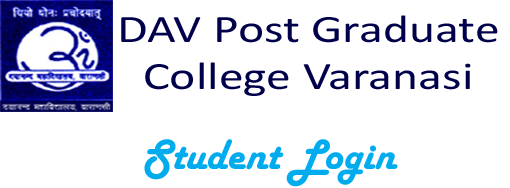
<style>
.page{position:relative;width:510px;height:188px;background:#ffffff}
.page>*{position:absolute;margin:0}
.t1{font:39.2px "Calibri";color:#00004b;scale:1.27 1}
.t2{font:44.2px "HarlowSolid";color:#00aced}
</style>
<div class="page">
<p class="t1" style="left:121px;top:15px;width:377px;height:81px;text-align:center">DAV Post Graduate <br>College Varanasi</p>
<p class="t2" style="left:144px;top:139px;width:254px;height:48px">Student Login</p>
</div>
